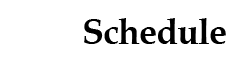
<style>
.page{position:relative;width:250px;height:60px;background:#ffffff}
.page>*{position:absolute;margin:0}
.t1{font:36px "Palatino-Bold";letter-spacing:-0.025em;color:#000000}
</style>
<div class="page">
<p class="t1" style="left:84px;top:18px;width:142px;height:26px">Schedule</p>
</div>
